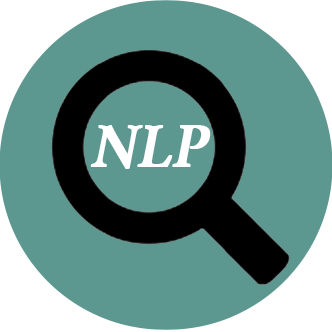
<style>
.page{position:relative;width:332px;height:332px;background:#5c9790}
.page>*{position:absolute;margin:0}
.t1{font:60px "GaramondClassicoBoldItalic";color:#ffffff;font-weight:bold}
</style>
<div class="page">
<p class="t1" style="left:90px;top:125px;width:121px;height:44px">NLP</p>
</div>
